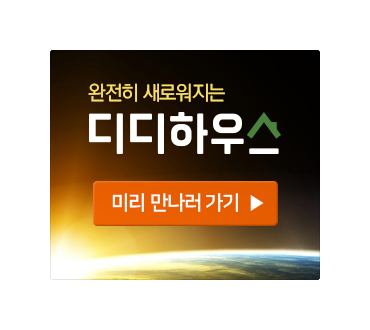
<style>
.page{position:relative;width:370px;height:330px;background:#ffffff}
.page>*{position:absolute;margin:0}
.t1{font:20px "KoPubDotumPM";letter-spacing:-0.05em;color:#f8dc67}
.t2{font:20px "NanumSquareOTFB";letter-spacing:-0.05em;color:#fffffe}
</style>
<div class="page">
<p class="t1" style="left:88px;top:83px;width:137px;height:19px">완전히 새로워지는</p>
<p class="t2" style="left:112px;top:193px;width:152px;height:19px">미리 만나러 가기  ▶︎</p>
</div>
